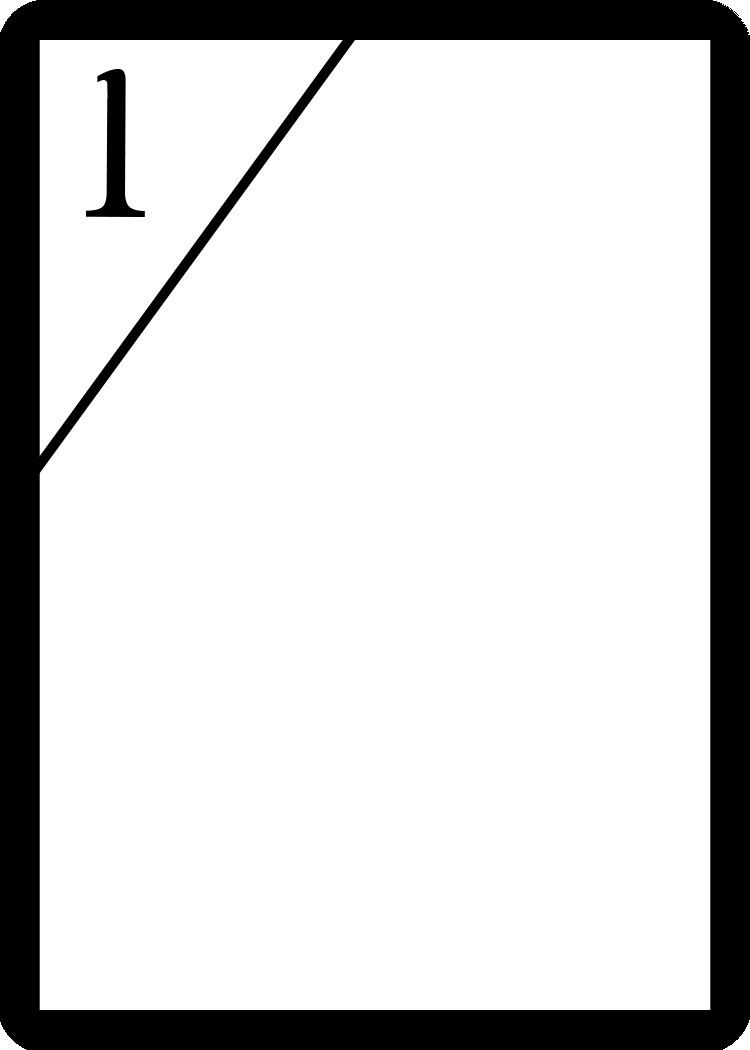
<style>
.page{position:relative;width:750px;height:1050px;background:#ffffff}
.page>*{position:absolute;margin:0}
.t1{font:300px "Dungeon";color:#000000}
</style>
<div class="page">
<p class="t1" style="left:85px;top:69px;width:60px;height:148px">1</p>
</div>
